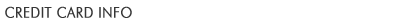
<style>
.page{position:relative;width:400px;height:24px;background:#ffffff}
.page>*{position:absolute;margin:0}
.t1{font:14.7px "FuturaBT-Light";letter-spacing:0.025em;color:#363636;text-transform:uppercase;font-weight:bold;scale:0.92 1}
</style>
<div class="page">
<p class="t1" style="left:5px;top:6px;width:127px;height:12px">credit card info</p>
</div>
